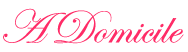
<style>
.page{position:relative;width:188px;height:52px;background:#ffffff}
.page>*{position:absolute;margin:0}
.t1{font:48px "EdwardianScriptITC";color:#ff2c67}
</style>
<div class="page">
<p class="t1" style="left:3px;top:8px;width:181px;height:36px">A Domicile</p>
</div>
